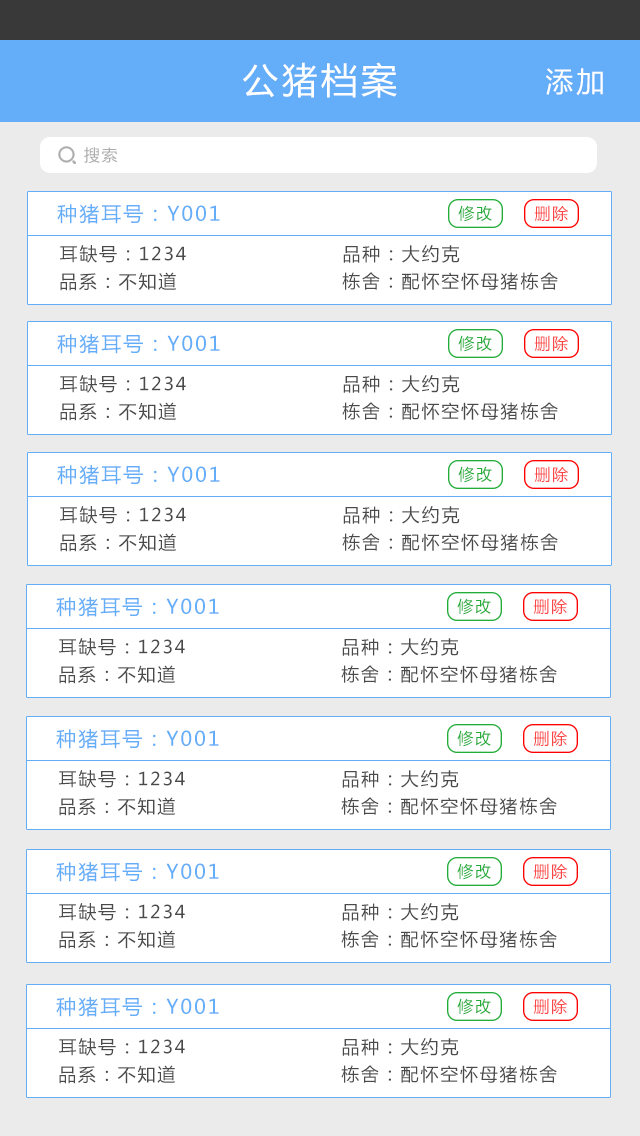
<style>
.page{position:relative;width:640px;height:1136px;background:#ffffff}
.page>*{position:absolute;margin:0}
.t1{font:36px "MicrosoftYaHei";letter-spacing:0.1em;color:#ffffff}
.t2{font:28px "MicrosoftYaHei";letter-spacing:0.1em;color:#ffffff}
.t3{font:16px "MicrosoftYaHei";letter-spacing:0.1em;color:#acacac}
.t4{font:20px "MicrosoftYaHei";letter-spacing:0.1em;color:#64adf9}
.t5{font:16px "MicrosoftYaHei";letter-spacing:0.1em;color:#22ac38}
.t6{font:16px "MicrosoftYaHei";letter-spacing:0.1em;color:#fd4747}
.t7{font:18px "MicrosoftYaHei";letter-spacing:0.1em;color:#4a4a4a}
</style>
<div class="page">
<p class="t1" style="left:243px;top:62px;width:154px;height:36px">公猪档案</p>
<p class="t2" style="left:545px;top:68px;width:58px;height:28px">添加</p>
<p class="t3" style="left:84px;top:147px;width:34px;height:16px">搜索</p>
<p class="t4" style="left:57px;top:204px;width:163px;height:20px">种猪耳号：Y001</p>
<p class="t5" style="left:458px;top:205px;width:34px;height:17px">修改</p>
<p class="t6" style="left:534px;top:205px;width:34px;height:17px">删除</p>
<p class="t7" style="left:60px;top:245px;width:126px;height:18px">耳缺号：1234</p>
<p class="t7" style="left:343px;top:245px;width:117px;height:18px">品种：大约克</p>
<p class="t7" style="left:60px;top:272px;width:116px;height:19px">品系：不知道</p>
<p class="t7" style="left:342px;top:272px;width:216px;height:18px">栋舍：配怀空怀母猪栋舍</p>
<p class="t4" style="left:57px;top:334px;width:163px;height:20px">种猪耳号：Y001</p>
<p class="t5" style="left:458px;top:335px;width:34px;height:17px">修改</p>
<p class="t6" style="left:534px;top:335px;width:34px;height:17px">删除</p>
<p class="t7" style="left:60px;top:375px;width:126px;height:18px">耳缺号：1234</p>
<p class="t7" style="left:343px;top:375px;width:117px;height:18px">品种：大约克</p>
<p class="t7" style="left:60px;top:402px;width:116px;height:19px">品系：不知道</p>
<p class="t7" style="left:342px;top:402px;width:216px;height:18px">栋舍：配怀空怀母猪栋舍</p>
<p class="t4" style="left:57px;top:465px;width:163px;height:20px">种猪耳号：Y001</p>
<p class="t5" style="left:458px;top:466px;width:34px;height:17px">修改</p>
<p class="t6" style="left:534px;top:466px;width:34px;height:17px">删除</p>
<p class="t7" style="left:60px;top:506px;width:126px;height:18px">耳缺号：1234</p>
<p class="t7" style="left:343px;top:506px;width:117px;height:18px">品种：大约克</p>
<p class="t7" style="left:60px;top:533px;width:116px;height:19px">品系：不知道</p>
<p class="t7" style="left:342px;top:533px;width:216px;height:18px">栋舍：配怀空怀母猪栋舍</p>
<p class="t4" style="left:56px;top:597px;width:163px;height:20px">种猪耳号：Y001</p>
<p class="t5" style="left:457px;top:598px;width:34px;height:17px">修改</p>
<p class="t6" style="left:533px;top:598px;width:34px;height:17px">删除</p>
<p class="t7" style="left:59px;top:638px;width:126px;height:18px">耳缺号：1234</p>
<p class="t7" style="left:342px;top:638px;width:117px;height:18px">品种：大约克</p>
<p class="t7" style="left:59px;top:665px;width:116px;height:19px">品系：不知道</p>
<p class="t7" style="left:341px;top:665px;width:216px;height:18px">栋舍：配怀空怀母猪栋舍</p>
<p class="t4" style="left:56px;top:729px;width:163px;height:20px">种猪耳号：Y001</p>
<p class="t5" style="left:457px;top:730px;width:34px;height:17px">修改</p>
<p class="t6" style="left:533px;top:730px;width:34px;height:17px">删除</p>
<p class="t7" style="left:59px;top:770px;width:126px;height:18px">耳缺号：1234</p>
<p class="t7" style="left:342px;top:770px;width:117px;height:18px">品种：大约克</p>
<p class="t7" style="left:59px;top:797px;width:116px;height:19px">品系：不知道</p>
<p class="t7" style="left:341px;top:797px;width:216px;height:18px">栋舍：配怀空怀母猪栋舍</p>
<p class="t4" style="left:56px;top:862px;width:163px;height:20px">种猪耳号：Y001</p>
<p class="t5" style="left:457px;top:863px;width:34px;height:17px">修改</p>
<p class="t6" style="left:533px;top:863px;width:34px;height:17px">删除</p>
<p class="t7" style="left:59px;top:903px;width:126px;height:18px">耳缺号：1234</p>
<p class="t7" style="left:342px;top:903px;width:117px;height:18px">品种：大约克</p>
<p class="t7" style="left:59px;top:930px;width:116px;height:19px">品系：不知道</p>
<p class="t7" style="left:341px;top:930px;width:216px;height:18px">栋舍：配怀空怀母猪栋舍</p>
<p class="t4" style="left:56px;top:997px;width:163px;height:20px">种猪耳号：Y001</p>
<p class="t5" style="left:457px;top:998px;width:34px;height:17px">修改</p>
<p class="t6" style="left:533px;top:998px;width:34px;height:17px">删除</p>
<p class="t7" style="left:59px;top:1038px;width:126px;height:18px">耳缺号：1234</p>
<p class="t7" style="left:342px;top:1038px;width:117px;height:18px">品种：大约克</p>
<p class="t7" style="left:59px;top:1065px;width:116px;height:19px">品系：不知道</p>
<p class="t7" style="left:341px;top:1065px;width:216px;height:18px">栋舍：配怀空怀母猪栋舍</p>
</div>
